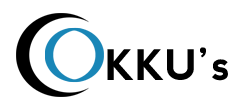
<style>
.page{position:relative;width:252px;height:105px;background:#ffffff}
.page>*{position:absolute;margin:0}
.t1{font:42px "nevis-Bold";color:#000000}
</style>
<div class="page">
<p class="t1" style="left:107px;top:47px;width:121px;height:34px">KKU’s</p>
</div>
